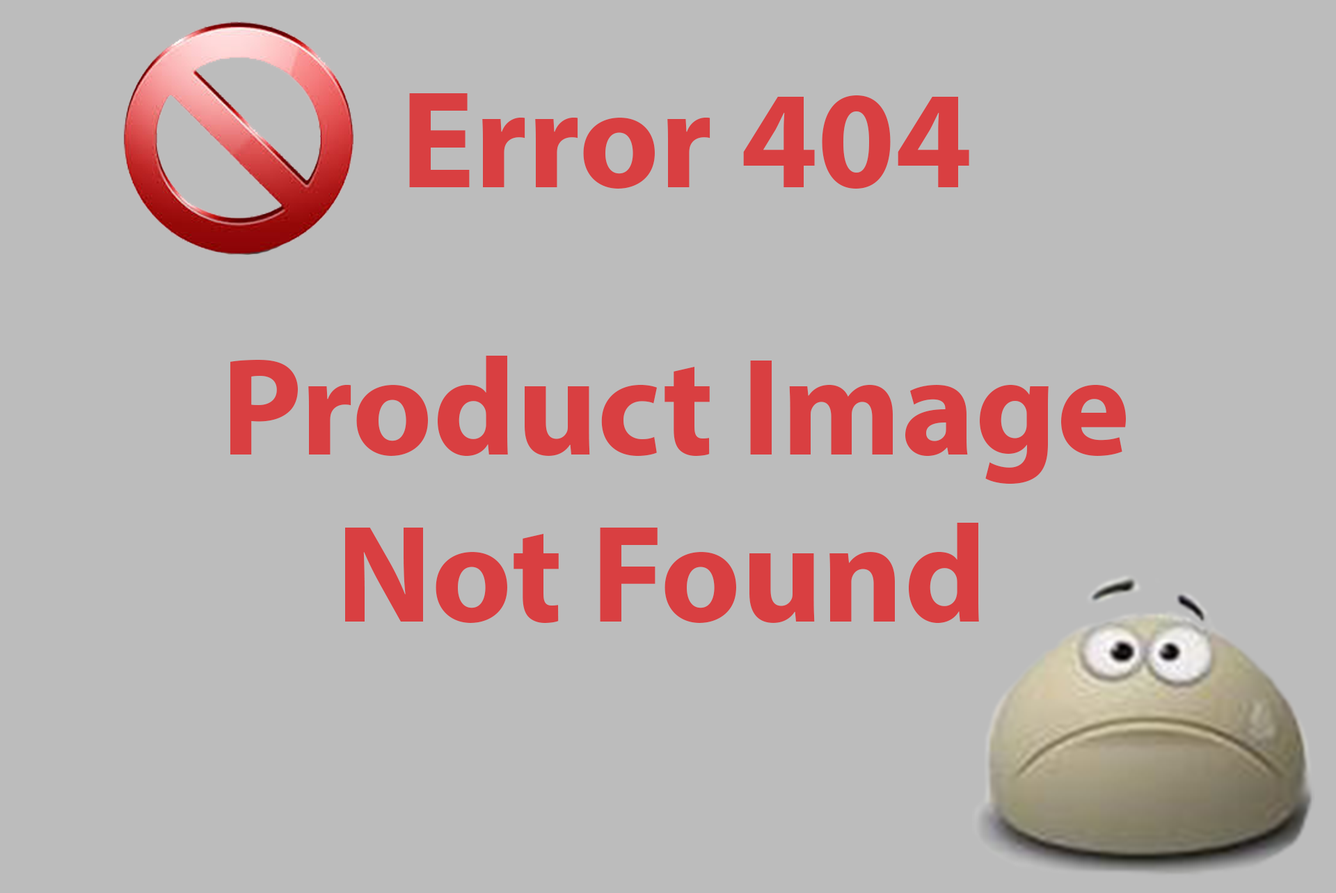
<style>
.page{position:relative;width:1336px;height:893px;background:#bcbcbc}
.page>*{position:absolute;margin:0}
.t1{font:139.2px "MyriadHebrew-Bold";color:#d93f41}
</style>
<div class="page">
<p class="t1" style="left:409px;top:93px;width:560px;height:96px">Error 404</p>
<p class="t1" style="left:230px;top:356px;width:896px;height:267px;text-align:center">Product Image <br>Not Found</p>
</div>
